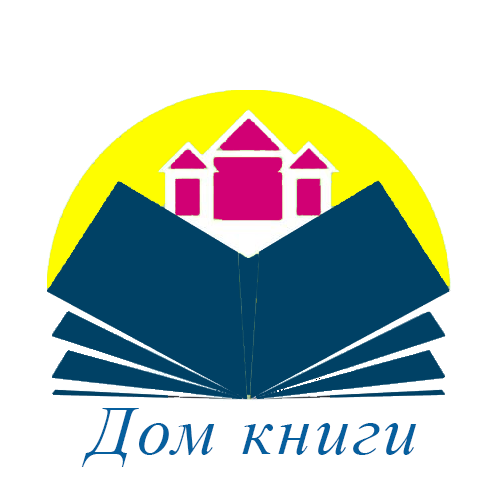
<style>
.page{position:relative;width:500px;height:500px;background:#ffffff}
.page>*{position:absolute;margin:0}
.t1{font:69.4px "TimesNewRomanPS-ItalicMT";letter-spacing:0.05em;color:#065f9e}
</style>
<div class="page">
<p class="t1" style="left:81px;top:408px;width:336px;height:59px">Дом книги</p>
</div>
